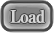
<style>
.page{position:relative;width:54px;height:33px}
.page>*{position:absolute;margin:0}
.t1{font:17px "RyuminPro-ExBold";letter-spacing:-0.08em;color:#dad3d1;font-weight:bold;scale:0.9 1}
</style>
<div class="page">
<p class="t1" style="left:10px;top:9px;width:35px;height:14px">Load</p>
</div>
